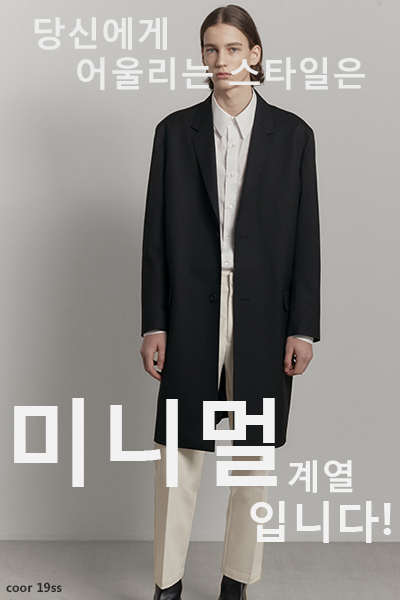
<style>
.page{position:relative;width:400px;height:600px}
.page>*{position:absolute;margin:0}
.t1{font:34.6px "MalgunGothicBold";color:#ececec}
.t2{font:93.7px "MalgunGothicBold";color:#f2f2f2}
.t3{font:34.6px "MalgunGothicBold";color:#f2f2f2}
.t4{font:44px "MalgunGothicBold";color:#f2f2f2}
.t5{font:12.4px "MalgunGothicBold";color:#282828}
</style>
<div class="page">
<p class="t1" style="left:34px;top:17px;width:133px;height:33px">당신에게</p>
<p class="t1" style="left:77px;top:57px;width:288px;height:33px">어울리는 스타일은</p>
<p class="t2" style="left:14px;top:398px;width:263px;height:89px">미니멀</p>
<p class="t3" style="left:288px;top:460px;width:65px;height:33px">계열</p>
<p class="t4" style="left:250px;top:501px;width:141px;height:42px">입니다!</p>
<p class="t5" style="left:6px;top:582px;width:56px;height:11px">coor 19ss</p>
</div>
